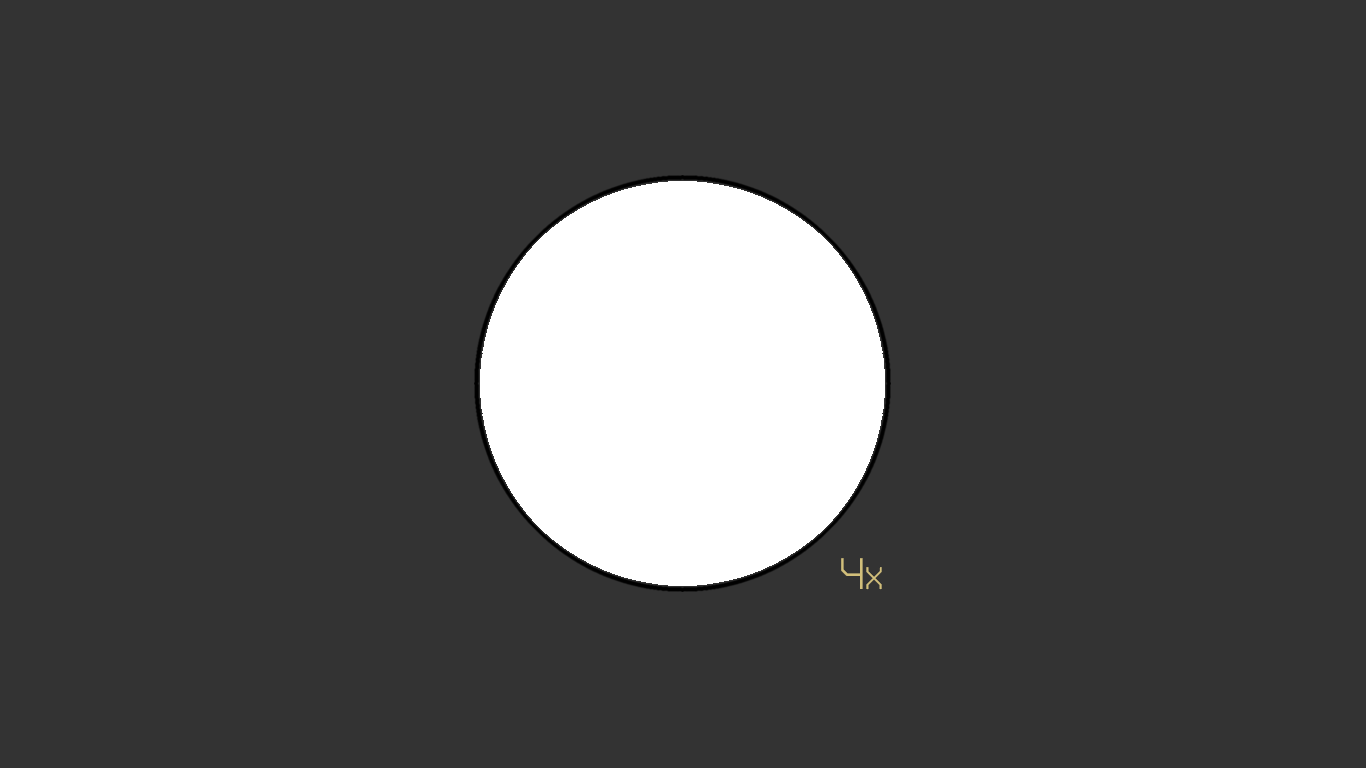
<style>
.page{position:relative;width:1366px;height:768px;background:#333333}
.page>*{position:absolute;margin:0}
.t1{font:44px "Arame-Thin";color:#d2bf7a}
.t2{font:31px "Arame-Thin";color:#d2bf7a}
</style>
<div class="page">
<p class="t1" style="left:841px;top:558px;width:41px;height:32px">4<span class="t2">x</span></p>
</div>
